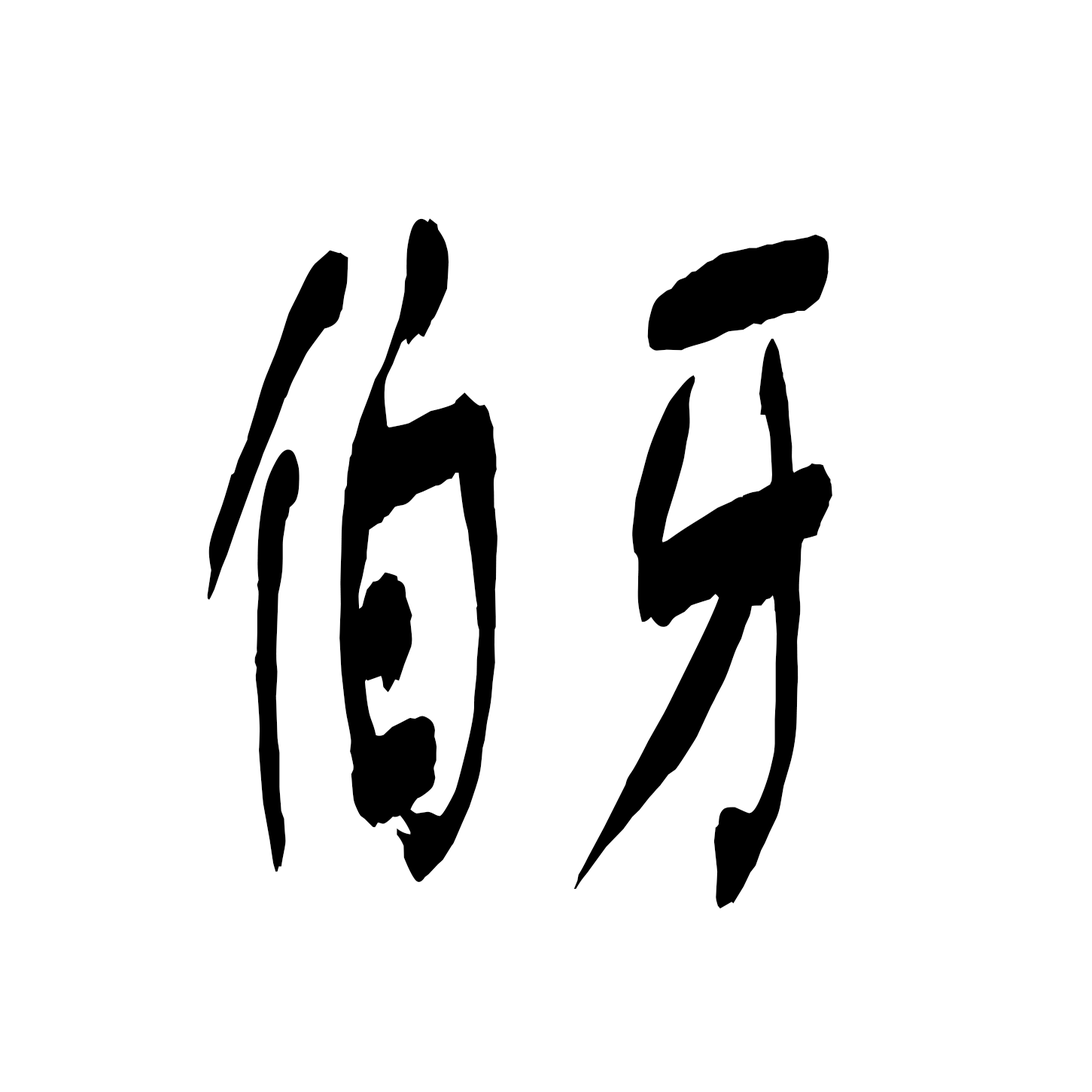
<style>
.page{position:relative;width:1092px;height:1092px;background:#ffffff}
.page>*{position:absolute;margin:0}
.t1{font:804.8px "HYn1gf";color:#000000;scale:0.45 1}
</style>
<div class="page">
<p class="t1" style="left:207px;top:218px;width:625px;height:691px">伯牙</p>
</div>
